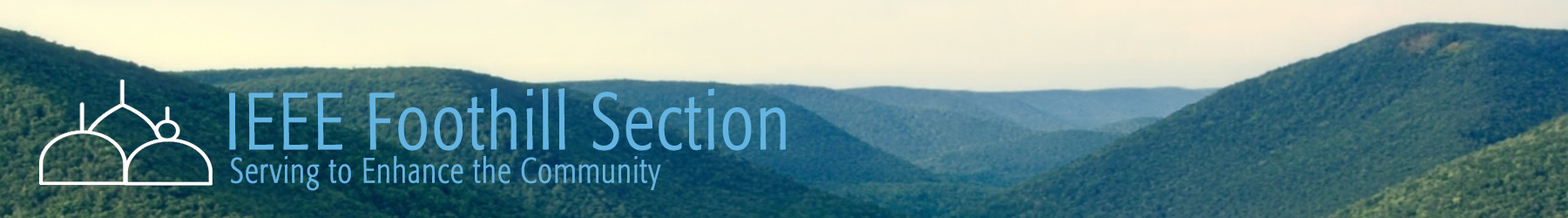
<style>
.page{position:relative;width:1568px;height:218px}
.page>*{position:absolute;margin:0}
.t1{font:79px "Formata-LightCondensed";letter-spacing:0.01em;color:#64b4e2;font-weight:bold;scale:0.92 1}
.t2{font:34.8px "Formata-LightCondensed";letter-spacing:0.01em;color:#64b3e1;font-weight:bold;scale:0.92 1}
</style>
<div class="page">
<p class="t1" style="left:229px;top:88px;width:557px;height:63px">IEEE Foothill Section</p>
<p class="t2" style="left:231px;top:155px;width:430px;height:36px">Serving to Enhance the Community</p>
</div>
